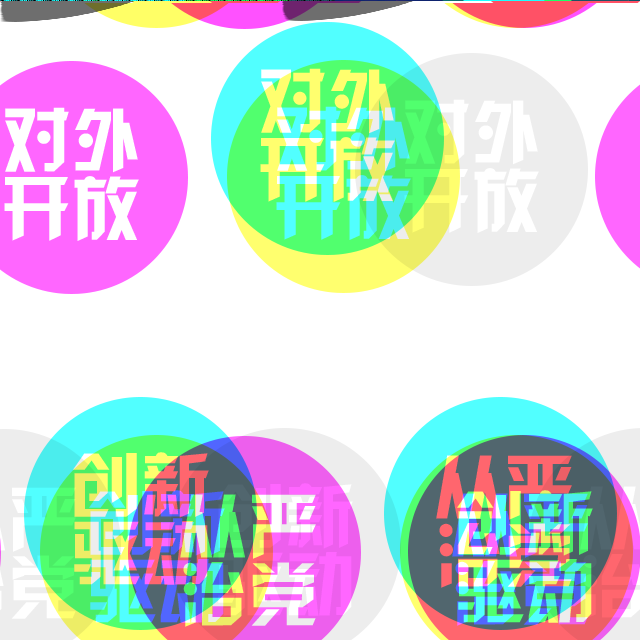
<style>
.page{position:relative;width:640px;height:640px;background:#ffffff}
.page>*{position:absolute;margin:0}
.t1{font:70px/68px "JLinXin"}
</style>
<div class="page">
<p class="t1" style="left:260px;top:67px;width:135px;height:134px;text-align:center">对外<br>开放</p>
<p class="t1" style="left:73px;top:451px;width:136px;height:133px;text-align:center">创新<br>驱动</p>
<p class="t1" style="left:436px;top:454px;width:136px;height:133px;text-align:center">从严<br>治党</p>
</div>
